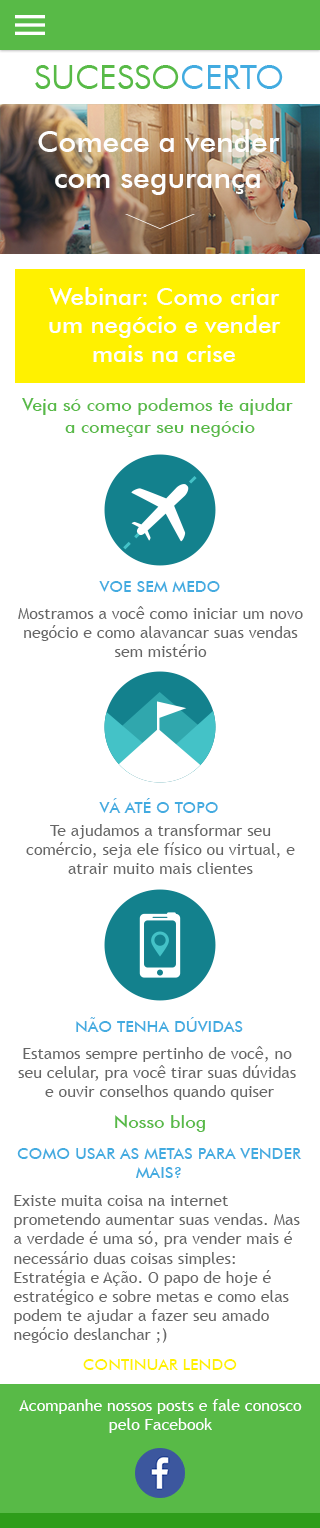
<style>
.page{position:relative;width:320px;height:1528px;background:#ffffff}
.page>*{position:absolute;margin:0}
.t1{font:30px "FuturaBT-Medium";color:#fefefe}
.t2{font:24px "FuturaBT-Medium";color:#ffffff}
.t3{font:18px "FuturaBT-Medium";color:#58ba47}
.t4{font:16px "FuturaBT-Medium";color:#42abe0;text-transform:uppercase}
.t5{font:16px "TrebuchetMS";color:#666666}
.t6{font:16px "FuturaBT-Medium";color:#fff100;text-transform:uppercase}
.t7{font:16px "TrebuchetMS";color:#ffffff}
</style>
<div class="page">
<p class="t1" style="left:38px;top:129px;width:242px;height:66px;text-align:center">Comece a vender<br>com segurança</p>
<p class="t2" style="left:49px;top:287px;width:232px;height:75px;text-align:center">Webinar: Como criar<br>um negócio e vender<br>mais na crise</p>
<p class="t3" style="left:22px;top:398px;width:271px;height:39px;text-align:center">Veja só como podemos te ajudar <br>a começar seu negócio</p>
<p class="t4" style="left:99px;top:581px;width:121px;height:11px">Voe sem medo</p>
<p class="t5" style="left:18px;top:606px;width:285px;height:51px;text-align:center">Mostramos a você como iniciar um novo<br>negócio e como alavancar suas vendas<br>sem mistério</p>
<p class="t4" style="left:99px;top:798px;width:119px;height:15px">Vá até o topo</p>
<p class="t5" style="left:26px;top:824px;width:269px;height:50px;text-align:center">Te ajudamos a transformar seu<br>comércio, seja ele físico ou virtual, e<br>atrair muito mais clientes</p>
<p class="t4" style="left:76px;top:1017px;width:167px;height:15px">Não tenha dúvidas</p>
<p class="t5" style="left:18px;top:1046px;width:278px;height:54px;text-align:center">Estamos sempre pertinho de você, no <br>seu celular, pra você tirar suas dúvidas <br>e ouvir conselhos quando quiser</p>
<p class="t3" style="left:115px;top:1115px;width:90px;height:17px">Nosso blog</p>
<p class="t4" style="left:17px;top:1148px;width:285px;height:30px;text-align:center">Como usar as metas para vender<br>mais?</p>
<p class="t5" style="left:13px;top:1195px;width:287px;height:148px">Existe muita coisa na internet<br>prometendo aumentar suas vendas. Mas<br>a verdade é uma só, pra vender mais é<br>necessário duas coisas simples:<br>Estratégia e Ação. O papo de hoje é<br>estratégico e sobre metas e como elas<br>podem te ajudar a fazer seu amado<br>negócio deslanchar ;)</p>
<p class="t6" style="left:83px;top:1359px;width:154px;height:11px">Continuar lendo</p>
<p class="t7" style="left:19px;top:1399px;width:283px;height:34px;text-align:center">Acompanhe nossos posts e fale conosco<br>pelo Facebook</p>
</div>
